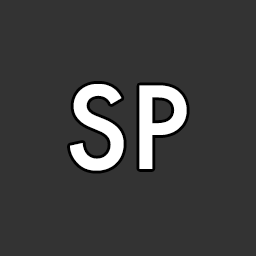
<style>
.page{position:relative;width:256px;height:256px;background:#333333}
.page>*{position:absolute;margin:0}
.t1{font:125px "FuturaPT-Medium";color:#ffffff}
</style>
<div class="page">
<p class="t1" style="left:70px;top:84px;width:117px;height:87px">SP</p>
</div>
